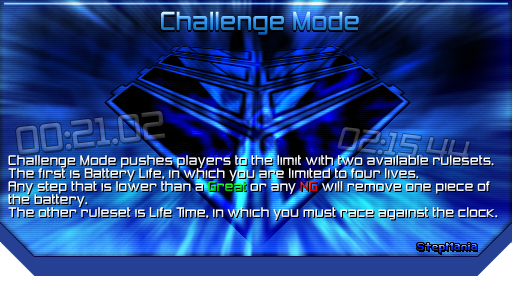
<style>
.page{position:relative;width:512px;height:288px}
.page>*{position:absolute;margin:0}
.t1{font:24px "ZeroThrees"}
.t2{font:36px "ZeroThrees"}
.t3{font:13px "ZeroThrees";color:#ffffff}
.t4{font:13px "ZeroThrees";color:#00ff00}
.t5{font:13px "ZeroThrees";color:#ff0000}
.t6{font:10px "Bit-Darling10-(sRB)"}
</style>
<div class="page">
<p class="t1" style="left:161px;top:11px;width:198px;height:24px">Challenge Mode</p>
<p class="t2" style="left:16px;top:111px;width:150px;height:44px;rotate:-7deg">00:21.02</p>
<p class="t3" style="left:8px;top:155px;width:490px;height:65px">Challenge Mode pushes players to the limit with two available rulesets.<br>The first is Battery Life, in which you are limited to four lives.<br>Any step that is lower than a <span class="t4">Great</span> or any <span class="t5">NG</span> will remove one piece of<br>the battery.<br>The other ruleset is Life Time, in which you must race against the clock.</p>
<p class="t6" style="left:417px;top:243px;width:60px;height:10px">StepMania</p>
</div>
